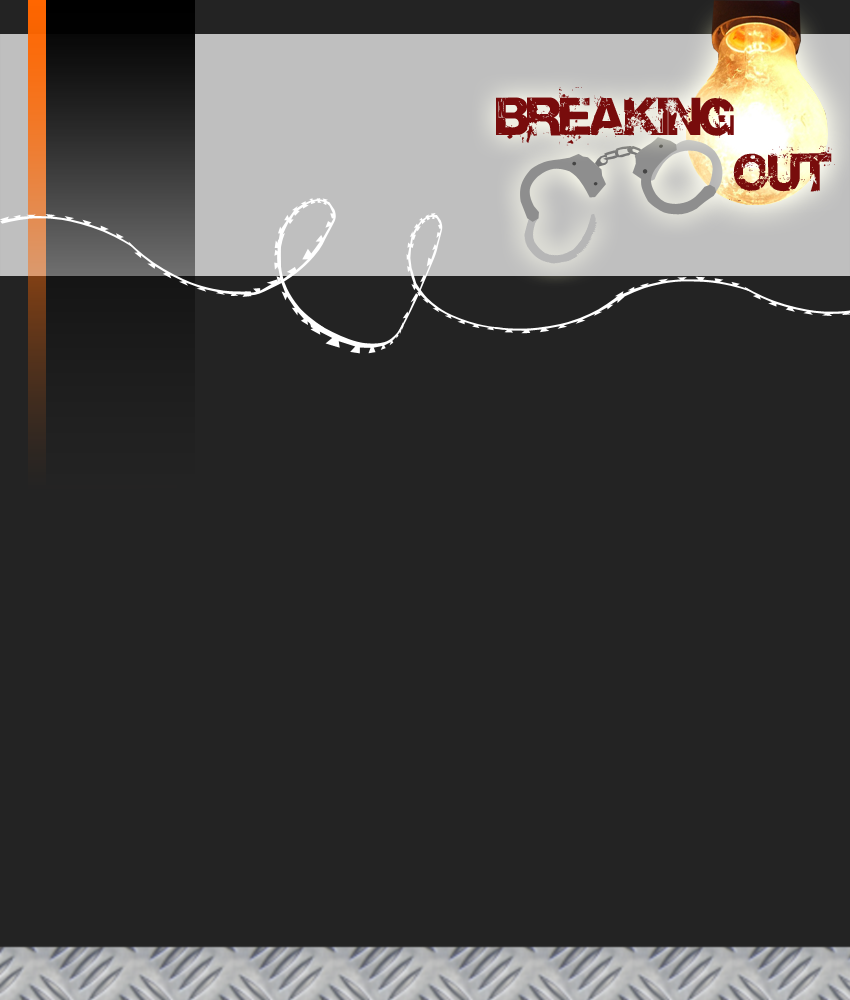
<style>
.page{position:relative;width:850px;height:1000px;background:#232323}
.page>*{position:absolute;margin:0}
.t1{font:47px "Base02";color:#780c0c}
</style>
<div class="page">
<p class="t1" style="left:496px;top:87px;width:339px;height:114px;text-align:right">BREAKING<br>OUT</p>
</div>
